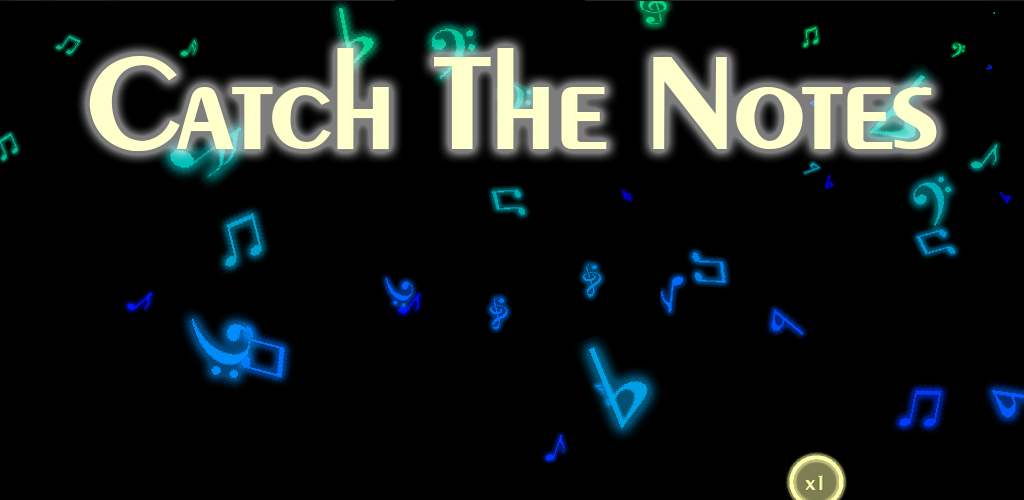
<style>
.page{position:relative;width:1024px;height:500px;background:#000000}
.page>*{position:absolute;margin:0}
.t1{font:140px "PareBold";color:#ffffcc}
</style>
<div class="page">
<p class="t1" style="left:89px;top:48px;width:848px;height:103px">Catch The Notes</p>
</div>
